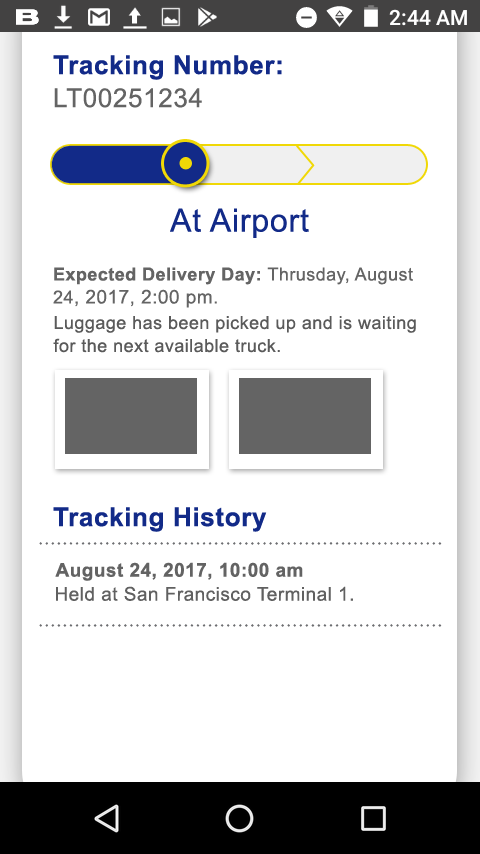
<style>
.page{position:relative;width:480px;height:854px;background:#ffffff}
.page>*{position:absolute;margin:0}
.t1{font:26px/33px "Arial-BoldMT";letter-spacing:0.025em;color:#122a88}
.t2{font:26px/33px "ArialMT";letter-spacing:0.025em;color:#646464}
.t3{font:32px "ArialMT";letter-spacing:0.025em;color:#122a88}
.t4{font:18px/23px "Arial-BoldMT";letter-spacing:0.025em;color:#646464}
.t5{font:18px/23px "ArialMT";letter-spacing:0.025em;color:#646464}
.t6{font:19px/23px "ArialMT";letter-spacing:0.025em;color:#646464}
.t7{font:18px/23px "ArialMT";letter-spacing:0.025em;color:#5a5a5a}
.t8{font:26px "Arial-BoldMT";letter-spacing:0.025em;color:#122a88}
.t9{font:19px "Arial-BoldMT";letter-spacing:0.025em;color:#636363}
.t10{font:19px "ArialMT";letter-spacing:0.025em;color:#606060}
</style>
<div class="page">
<p class="t1" style="left:53px;top:55px;width:229px;height:53px">Tracking Number:<br><span class="t2">LT00251234</span></p>
<p class="t3" style="left:170px;top:208px;width:139px;height:30px">At Airport</p>
<p class="t4" style="left:53px;top:267px;width:360px;height:41px">Expected Delivery Day: <span class="t5">Thrusday, August 24</span><span class="t6">, 2017, 2:00 pm.</span></p>
<p class="t7" style="left:53px;top:316px;width:363px;height:37px">Luggage has been picked up and is waiting for the next available truck.</p>
<p class="t8" style="left:53px;top:507px;width:214px;height:25px">Tracking History</p>
<p class="t9" style="left:55px;top:562px;width:248px;height:19px">August 24, 2017, 10:00 am</p>
<p class="t10" style="left:56px;top:586px;width:297px;height:15px">Held at San Francisco Terminal 1.</p>
</div>
